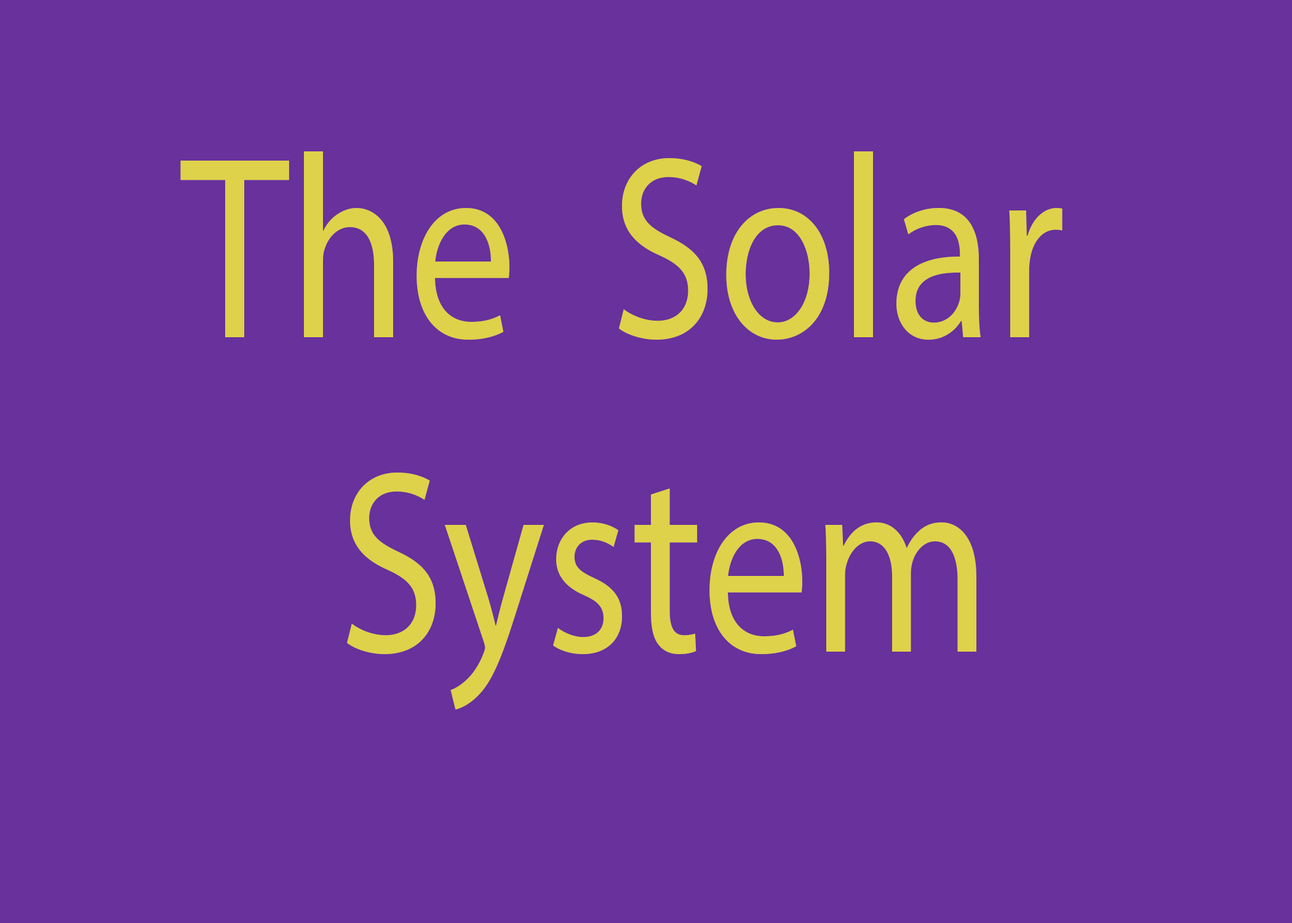
<style>
.page{position:relative;width:1292px;height:923px;background:#68319c}
.page>*{position:absolute;margin:0}
.t1{font:62.8px "MyriadPro-Regular";color:#ded24a;scale:0.83 1}
</style>
<div class="page">
<p class="t1" style="left:180px;top:151px;width:883px;height:559px">The  Solar <br> System</p>
</div>
